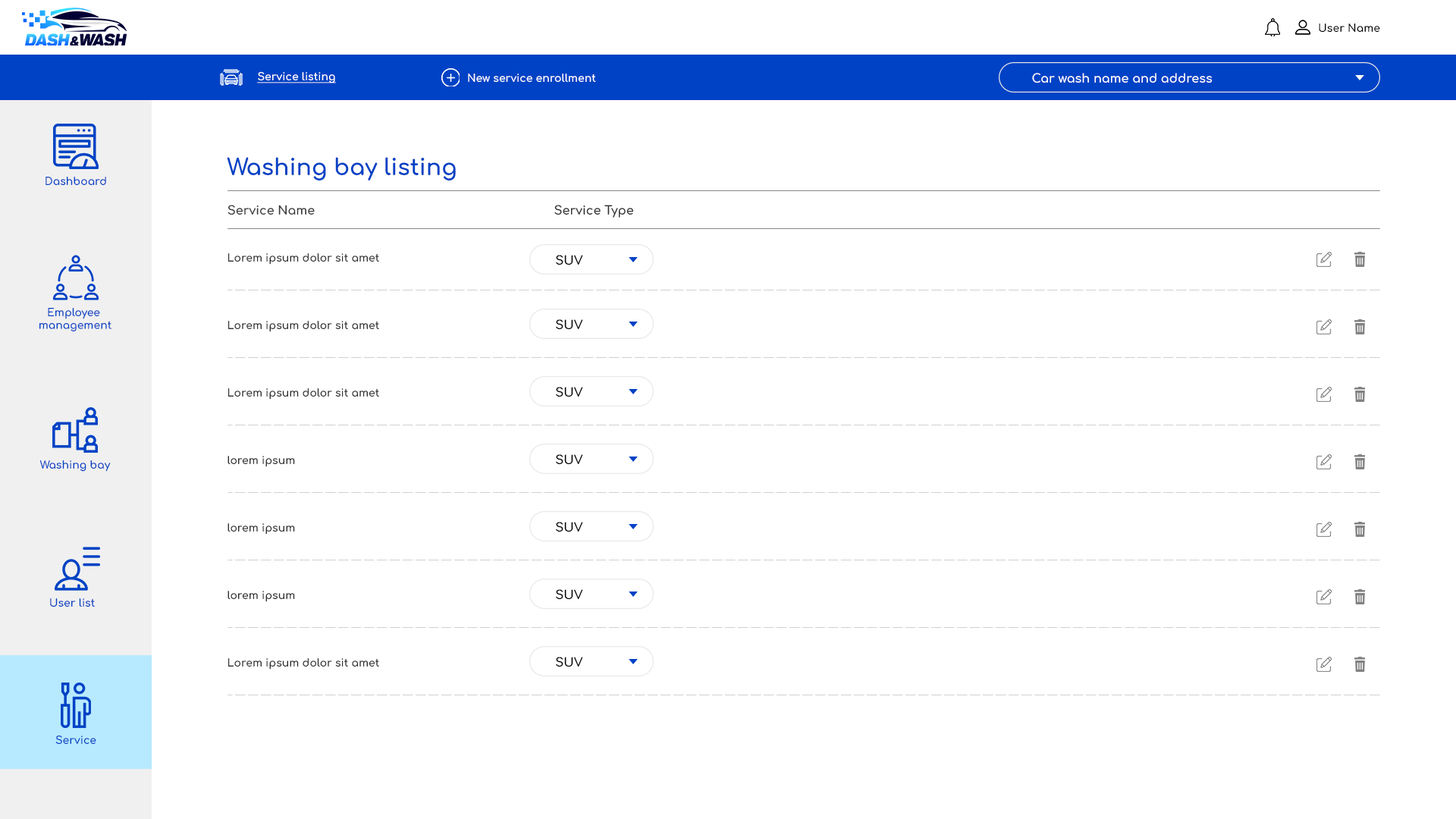
<style>
.page{position:relative;width:1456px;height:819px;background:#ffffff}
.page>*{position:absolute;margin:0}
.t1{font:10.6px "Comfortaa-Bold";color:#010101}
.t2{font:10.6px "Comfortaa-Bold";color:#ffffff;text-decoration:underline}
.t3{font:10.6px "Comfortaa-Bold";color:#ffffff}
.t4{font:12.1px "Comfortaa-Bold";color:#ffffff}
.t5{font:22.7px "Comfortaa-Bold";color:#0042c5}
.t6{font:10.6px "Comfortaa-Bold";color:#0042c5}
.t7{font:12.1px "Comfortaa-Bold";color:#393939}
.t8{font:12.1px "Comfortaa-Bold";color:#303030}
.t9{font:10.6px "Comfortaa-Bold";color:#303030}
.t10{font:12.1px "Comfortaa-Bold";color:#000000}
</style>
<div class="page">
<p class="t1" style="left:1319px;top:24px;width:61px;height:9px">User Name</p>
<p class="t2" style="left:257px;top:71px;width:79px;height:12px">Service listing</p>
<p class="t3" style="left:468px;top:74px;width:128px;height:8px">New service enrollment</p>
<p class="t4" style="left:1032px;top:73px;width:180px;height:10px">Car wash name and address</p>
<p class="t5" style="left:227px;top:157px;width:229px;height:23px">Washing bay listing</p>
<p class="t6" style="left:45px;top:177px;width:61px;height:8px">Dashboard</p>
<p class="t7" style="left:227px;top:205px;width:88px;height:10px">Service Name</p>
<p class="t8" style="left:554px;top:205px;width:79px;height:13px">Service Type</p>
<p class="t9" style="left:228px;top:253px;width:151px;height:12px">Lorem ipsum dolor sit amet</p>
<p class="t10" style="left:556px;top:255px;width:27px;height:10px">SUV</p>
<p class="t6" style="left:39px;top:308px;width:72px;height:23px;text-align:center">Employee <br>management</p>
<p class="t9" style="left:228px;top:321px;width:151px;height:11px">Lorem ipsum dolor sit amet</p>
<p class="t10" style="left:556px;top:319px;width:27px;height:11px">SUV</p>
<p class="t9" style="left:228px;top:388px;width:151px;height:12px">Lorem ipsum dolor sit amet</p>
<p class="t10" style="left:556px;top:387px;width:27px;height:10px">SUV</p>
<p class="t6" style="left:39px;top:460px;width:72px;height:12px">Washing bay</p>
<p class="t9" style="left:227px;top:456px;width:68px;height:11px">lorem ipsum</p>
<p class="t10" style="left:556px;top:454px;width:27px;height:11px">SUV</p>
<p class="t10" style="left:556px;top:522px;width:27px;height:10px">SUV</p>
<p class="t9" style="left:227px;top:523px;width:68px;height:12px">lorem ipsum</p>
<p class="t9" style="left:227px;top:591px;width:68px;height:11px">lorem ipsum</p>
<p class="t10" style="left:556px;top:589px;width:27px;height:11px">SUV</p>
<p class="t6" style="left:50px;top:598px;width:45px;height:9px">User list</p>
<p class="t9" style="left:228px;top:658px;width:151px;height:12px">Lorem ipsum dolor sit amet</p>
<p class="t10" style="left:556px;top:657px;width:27px;height:10px">SUV</p>
<p class="t6" style="left:55px;top:735px;width:41px;height:10px">Service</p>
</div>
